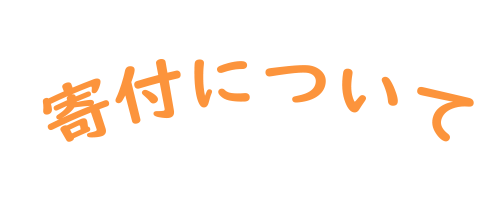
<style>
.page{position:relative;width:500px;height:200px;background:#ffffff}
.page>*{position:absolute;margin:0}
.t1{font:66.7px "UDDigiKyokashoNP-B";color:#fc943c}
</style>
<div class="page">
<p class="t1" style="left:42px;top:59px;width:432px;height:83px">寄付について</p>
</div>
